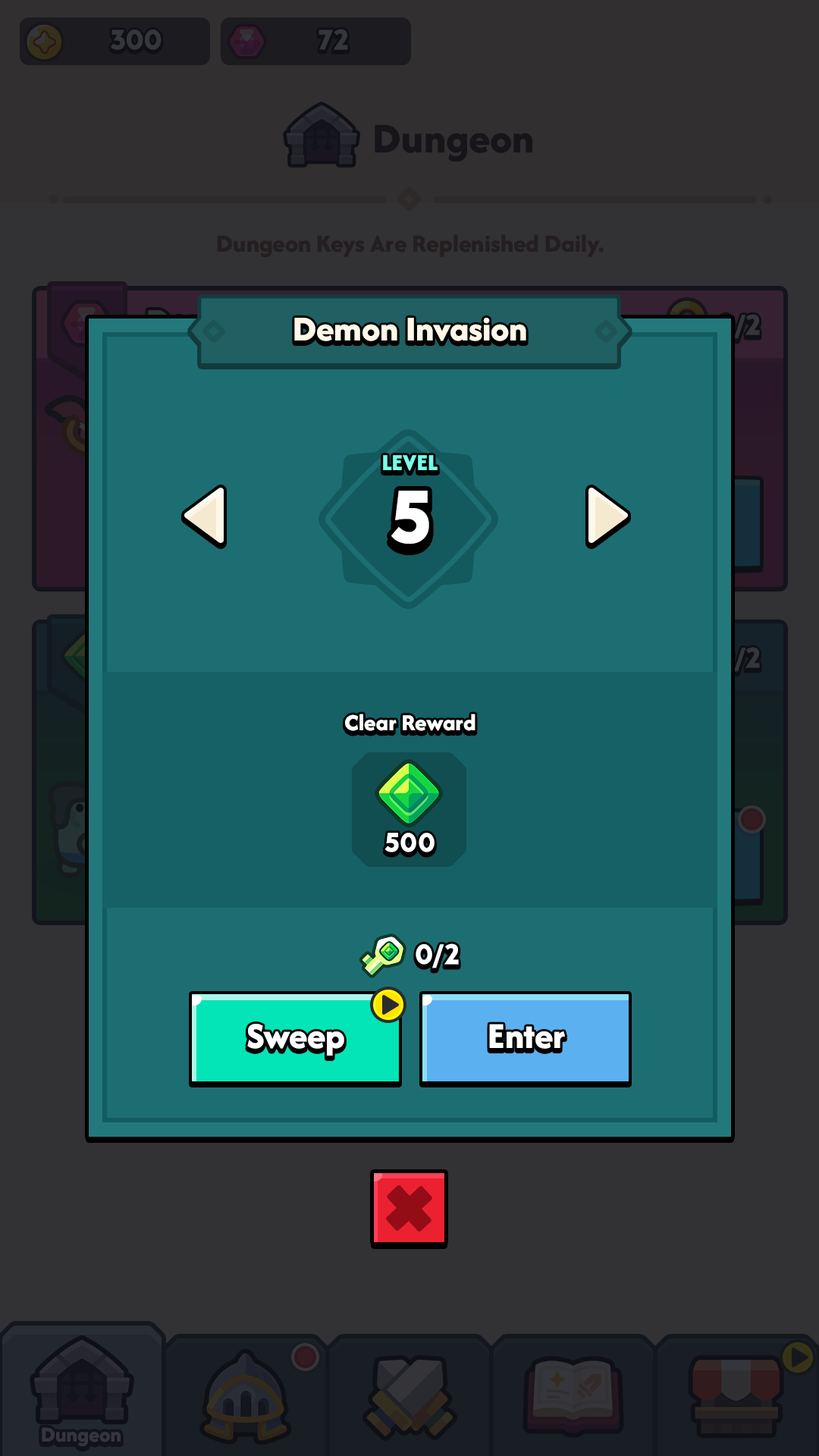
<style>
.page{position:relative;width:819px;height:1456px;background:#323133}
.page>*{position:absolute;margin:0}
.t1{font:36.4px "AfacadFlux-ExtraBold";color:#fff8e9}
.t2{font:24px "AfacadFlux-ExtraBold";color:#78ffea;text-transform:uppercase}
.t3{font:78px "LTAvocado-Bold";color:#ffffff;text-transform:uppercase}
.t4{font:24px "AfacadFlux-ExtraBold";color:#ffffff}
.t5{font:28.4px "LTAvocado-Bold";color:#ffffff}
.t6{font:29.6px "LTAvocado-Bold";color:#ffffff}
.t7{font:37.9px "AfacadFlux-ExtraBold";color:#ffffff}
</style>
<div class="page">
<p class="t1" style="left:294px;top:318px;width:232px;height:23px">Demon Invasion</p>
<p class="t2" style="left:383px;top:455px;width:55px;height:16px">Level</p>
<p class="t3" style="left:391px;top:491px;width:38px;height:53px">5</p>
<p class="t4" style="left:345px;top:714px;width:130px;height:17px">Clear Reward</p>
<p class="t5" style="left:384px;top:833px;width:51px;height:19px">500</p>
<p class="t6" style="left:416px;top:943px;width:43px;height:25px">0/2</p>
<p class="t7" style="left:247px;top:1024px;width:97px;height:32px">Sweep</p>
<p class="t7" style="left:489px;top:1024px;width:76px;height:25px">Enter</p>
</div>
